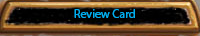
<style>
.page{position:relative;width:200px;height:36px}
.page>*{position:absolute;margin:0}
.t1{font:12px "MyriadPro-Regular";color:#00aeef}
</style>
<div class="page">
<p class="t1" style="left:74px;top:9px;width:61px;height:9px">Review Card</p>
</div>
